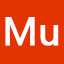
<style>
.page{position:relative;width:64px;height:64px;background:#e23300}
.page>*{position:absolute;margin:0}
.t1{font:36px "MicrosoftYaHei";color:#ffffff;font-weight:bold}
</style>
<div class="page">
<p class="t1" style="left:5px;top:17px;width:54px;height:29px">Mu</p>
</div>
